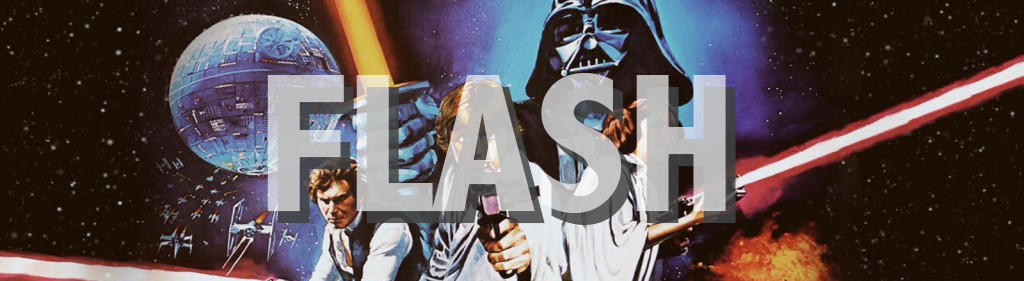
<style>
.page{position:relative;width:1024px;height:281px}
.page>*{position:absolute;margin:0}
.t1{font:200px "AbadiMT-CondensedExtraBold";color:#bebec0}
</style>
<div class="page">
<p class="t1" style="left:267px;top:73px;width:459px;height:140px">FLASH</p>
</div>
